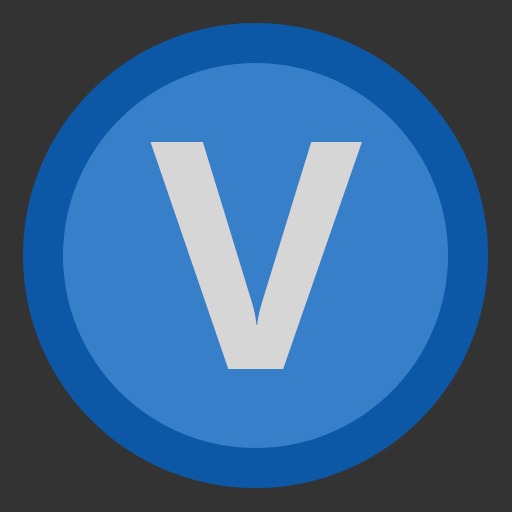
<style>
.page{position:relative;width:512px;height:512px;background:#377fc8}
.page>*{position:absolute;margin:0}
.t1{font:300px "MicrosoftYaHei-Bold";color:#d6d6d6}
</style>
<div class="page">
<p class="t1" style="left:150px;top:142px;width:212px;height:227px">V</p>
</div>
